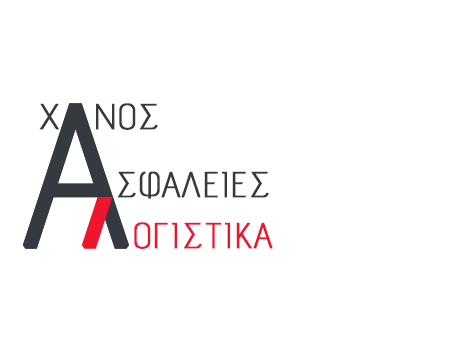
<style>
.page{position:relative;width:454px;height:340px;background:#ffffff}
.page>*{position:absolute;margin:0}
.t1{font:200px "AdventPro-Light";color:#343a40;font-weight:bold}
.t2{font:36px "AdventPro-Light";color:#343a40;font-weight:bold}
.t3{font:36px "AdventPro-Light";color:#ee152f;font-weight:bold}
</style>
<div class="page">
<p class="t1" style="left:22px;top:103px;width:107px;height:146px">Α</p>
<p class="t1" style="left:22px;top:103px;width:107px;height:146px">Λ</p>
<p class="t2" style="left:39px;top:103px;width:119px;height:27px">Χ   ΝΟΣ</p>
<p class="t2" style="left:117px;top:171px;width:152px;height:28px">ΣΦΑΛΕΙΕΣ</p>
<p class="t3" style="left:134px;top:222px;width:139px;height:27px">ΟΓΙΣΤΙΚΑ</p>
</div>
